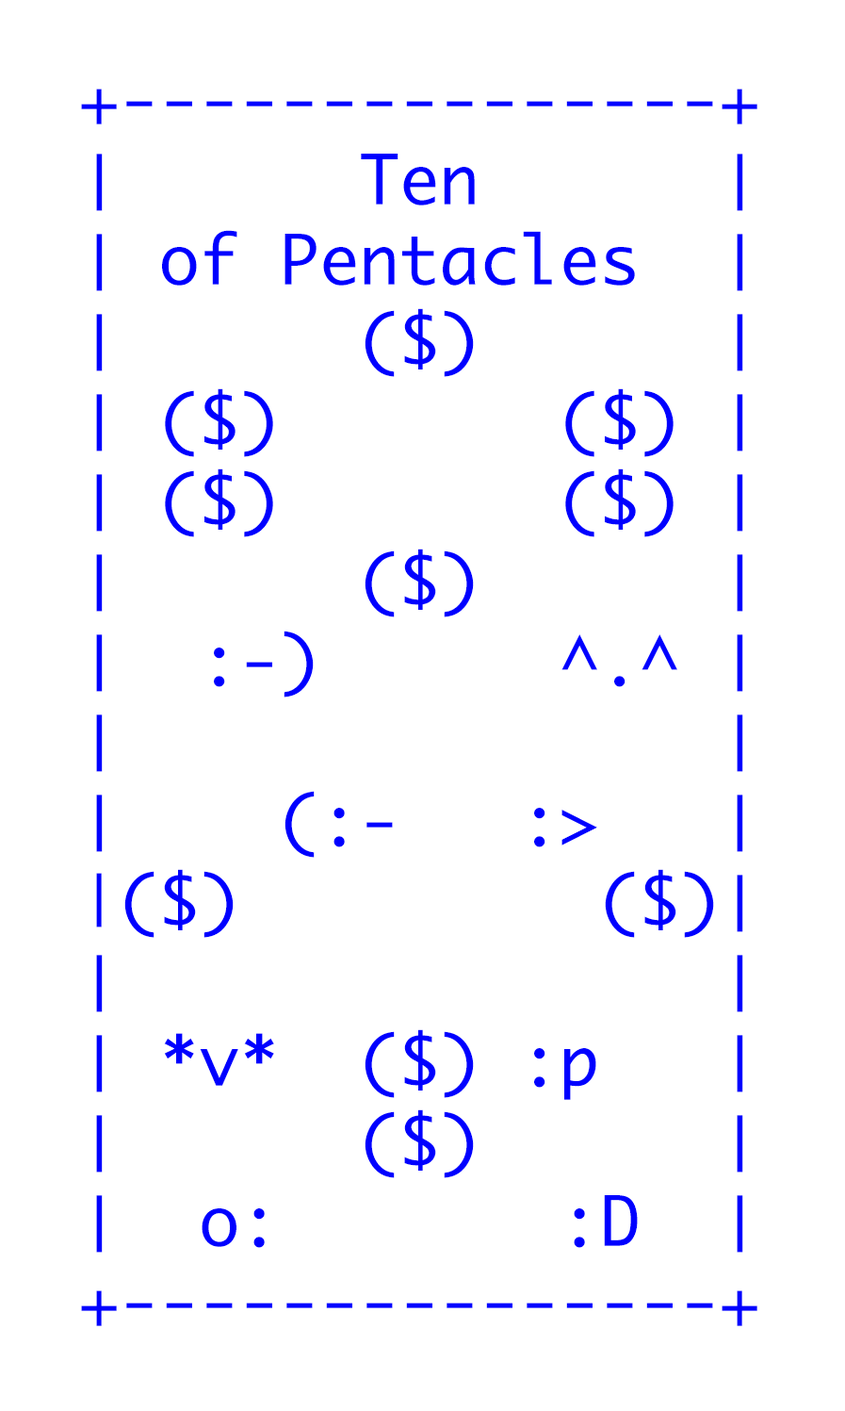
<style>
.page{position:relative;width:845px;height:1411px;background:#ffffff}
.page>*{position:absolute;margin:0}
.t1{font:66.7px "Monaco";color:#0000ff}
</style>
<div class="page">
<p class="t1" style="left:81px;top:89px;width:677px;height:1237px">+---------------+<br>│      Ten      │<br>│ of Pentacles  │<br>│      ($)      │<br>│ ($)       ($) │<br>│ ($)       ($) │<br>│      ($)      │<br>│  :-)      ^.^ │ <br>│               │ <br>│    (:-   :&gt;   │<br>|($)         ($)│ <br>│               │ <br>│ *v*  ($) :p   │<br>│      ($)      │<br>│  o:       :D  │<br>+---------------+</p>
</div>
